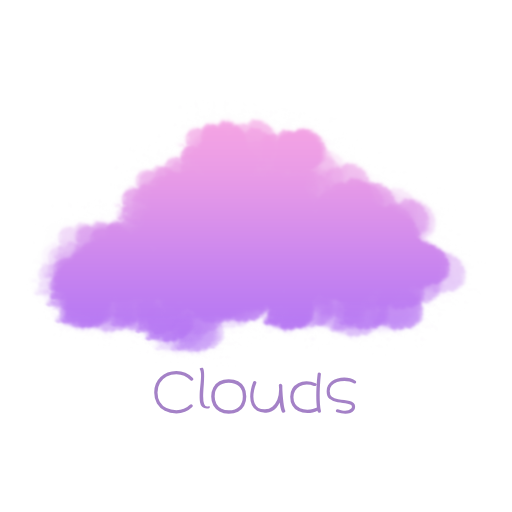
<style>
.page{position:relative;width:512px;height:512px;background:#ffffff}
.page>*{position:absolute;margin:0}
.t1{font:55px "HachiMaruPop-Regular";color:#a481c7}
.t2{font:55px "Handlee-Regular";color:#a481c7}
</style>
<div class="page">
<p class="t1" style="left:154px;top:367px;width:203px;height:47px">C<span class="t2">l</span>ouds</p>
</div>
